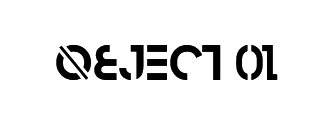
<style>
.page{position:relative;width:332px;height:134px;background:#ffffff}
.page>*{position:absolute;margin:0}
.t1{font:50px "Razed-Bold";color:#000000}
</style>
<div class="page">
<p class="t1" style="left:56px;top:45px;width:222px;height:35px">OBJECT 01</p>
</div>
